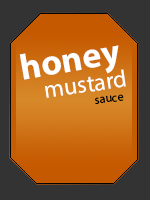
<style>
.page{position:relative;width:150px;height:200px;background:#333333}
.page>*{position:absolute;margin:0}
.t1{font:36px "MyriadPro-Bold";color:#ffffff}
.t2{font:24px "MyriadPro-Regular";color:#ffffff}
.t3{font:12px "MyriadPro-Regular";color:#000000}
</style>
<div class="page">
<p class="t1" style="left:19px;top:45px;width:100px;height:35px;rotate:-10deg">honey</p>
<p class="t2" style="left:45px;top:69px;width:81px;height:29px;rotate:-8deg">mustard</p>
<p class="t3" style="left:95px;top:94px;width:29px;height:10px;rotate:-7deg">sauce</p>
</div>
